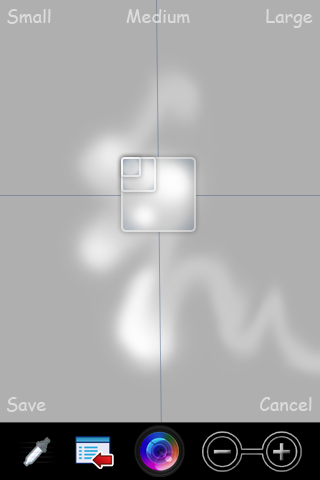
<style>
.page{position:relative;width:320px;height:480px;background:#afafaf}
.page>*{position:absolute;margin:0}
.t1{font:18px "ComicSansMS";color:#dbdbdb}
</style>
<div class="page">
<p class="t1" style="left:7px;top:9px;width:44px;height:15px">Small</p>
<p class="t1" style="left:126px;top:9px;width:64px;height:14px">Medium</p>
<p class="t1" style="left:266px;top:9px;width:47px;height:19px">Large</p>
<p class="t1" style="left:7px;top:397px;width:39px;height:15px">Save</p>
<p class="t1" style="left:260px;top:397px;width:52px;height:14px">Cancel</p>
</div>
